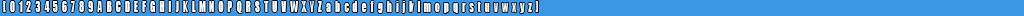
<style>
.page{position:relative;width:1024px;height:16px;background:#3b97e4}
.page>*{position:absolute;margin:0}
.t1{font:13.5px "Impact";letter-spacing:0.46em;color:#fffefe;scale:0.67 1}
</style>
<div class="page">
<p class="t1" style="left:3px;top:1px;width:535px;height:12px">[0123456789ABCDEFGHIJKLMNOPQRSTUVWXYZabcdefghijklmopqrstuvwxyz]</p>
</div>
